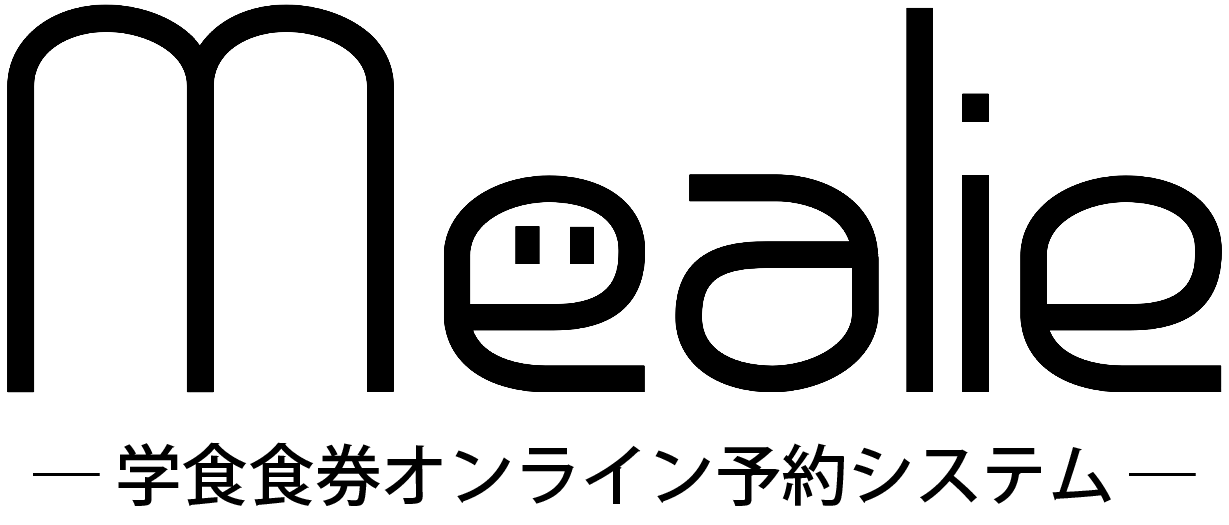
<style>
.page{position:relative;width:1229px;height:525px;background:#ffffff}
.page>*{position:absolute;margin:0}
.t1{font:66.7px "KozGoPr6N-Medium";color:#000000}
</style>
<div class="page">
<p class="t1" style="left:33px;top:442px;width:1163px;height:64px">― 学食食券オンライン予約システム ―</p>
</div>
